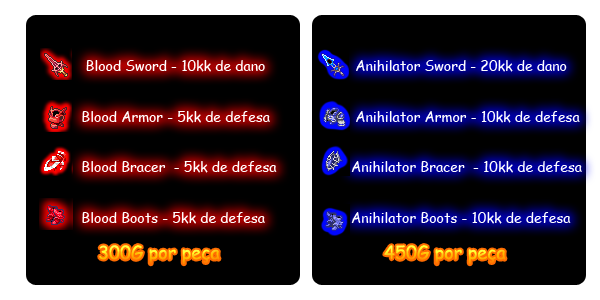
<style>
.page{position:relative;width:600px;height:300px;background:#000000}
.page>*{position:absolute;margin:0}
.t1{font:14px "ComicSansMS";color:#ffffff}
.t2{font:18px "ComicSansMS"}
</style>
<div class="page">
<p class="t1" style="left:82px;top:60px;width:195px;height:164px">Blood Sword - 10kk de dano<br><br><br>  Blood Armor - 5kk de defesa<br><br><br>  Blood Bracer  - 5kk de defesa<br><br><br>  Blood Boots - 5kk de defesa</p>
<p class="t1" style="left:351px;top:60px;width:231px;height:164px">Anihilator Sword - 20kk de dano<br><br><br> Anihilator Armor - 10kk de defesa<br><br><br>Anihilator Bracer  - 10kk de defesa<br><br><br>Anihilator Boots - 10kk de defesa</p>
<p class="t2" style="left:99px;top:245px;width:121px;height:20px">300G por peça</p>
<p class="t2" style="left:384px;top:245px;width:122px;height:20px">450G por peça</p>
</div>
